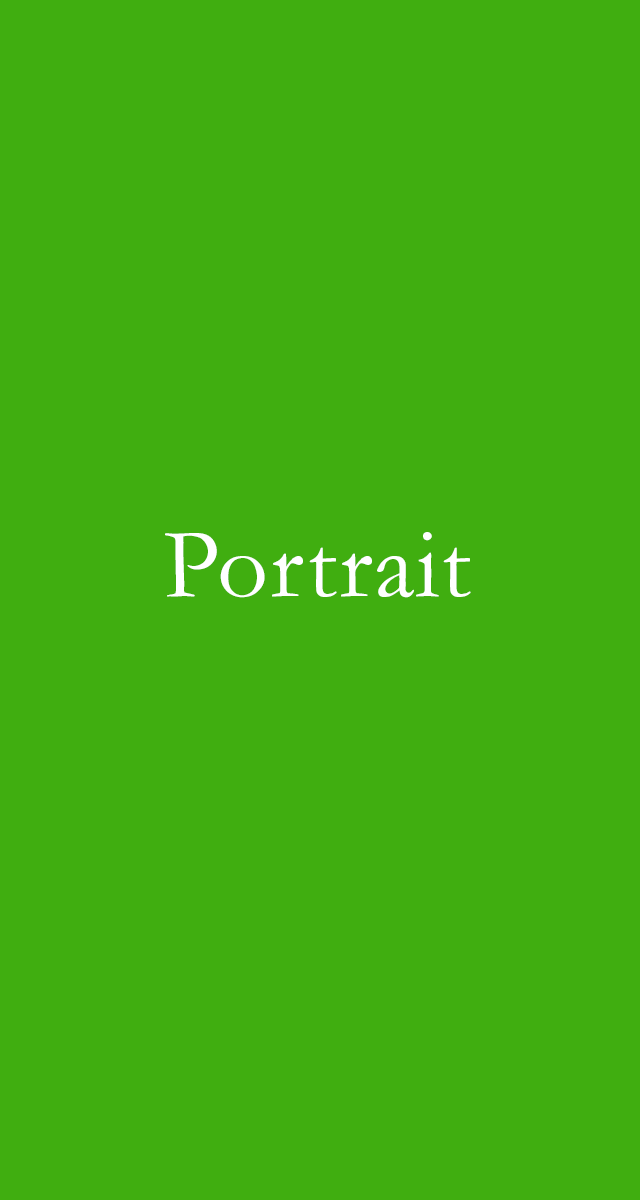
<style>
.page{position:relative;width:640px;height:1200px;background:#40ae10}
.page>*{position:absolute;margin:0}
.t1{font:100px "Garamond";letter-spacing:0.02em;color:#ffffff}
</style>
<div class="page">
<p class="t1" style="left:165px;top:532px;width:306px;height:66px">Portrait</p>
</div>
